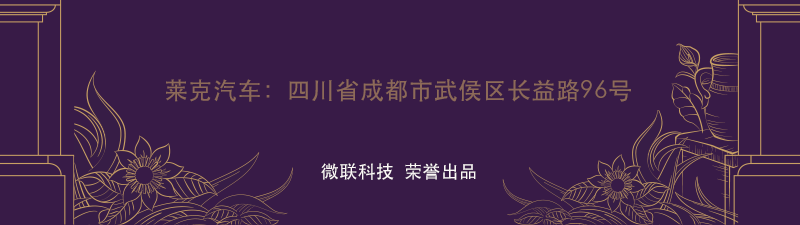
<style>
.page{position:relative;width:800px;height:225px;background:#381b47}
.page>*{position:absolute;margin:0}
.t1{font:24px "STHeiti";letter-spacing:0.02em;color:#8d6a58}
.t2{font:18px "STHeiti";letter-spacing:0.02em;color:#fcf9f7}
.t3{font:24px "STHeiti";letter-spacing:0.02em;color:#fcf9f7}
</style>
<div class="page">
<p class="t1" style="left:166px;top:79px;width:465px;height:23px">莱克汽车：四川省成都市武侯区长益路96号</p>
<p class="t2" style="left:321px;top:163px;width:155px;height:17px"><span class="t3">        </span>微联科技  荣誉出品</p>
</div>
